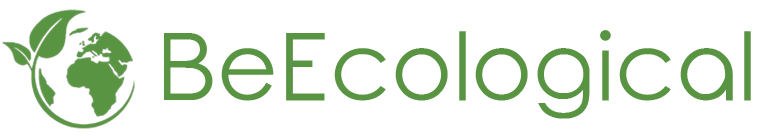
<style>
.page{position:relative;width:758px;height:138px;background:#ffffff}
.page>*{position:absolute;margin:0}
.t1{font:92.9px "RoundedElegance-Regular";color:#589442}
</style>
<div class="page">
<p class="t1" style="left:164px;top:30px;width:587px;height:89px">BeEcological</p>
</div>
